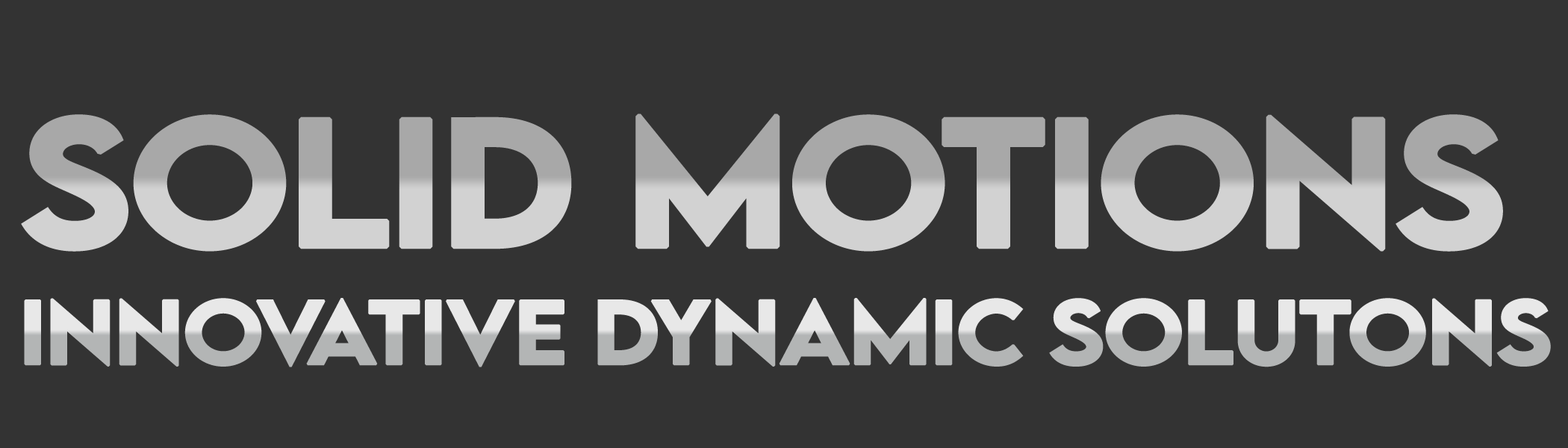
<style>
.page{position:relative;width:1568px;height:448px;background:#333333}
.page>*{position:absolute;margin:0}
.t1{font:161.3px "LEMONMILK-Medium";letter-spacing:-0.02em;font-weight:bold;scale:1.12 1}
.t2{font:80.6px "LEMONMILK-Medium";letter-spacing:-0.02em;font-weight:bold;scale:1.12 1}
</style>
<div class="page">
<p class="t1" style="left:21px;top:113px;width:1482px;height:139px">solid motions</p>
<p class="t2" style="left:24px;top:298px;width:1527px;height:69px">Innovative Dynamic Solutons</p>
</div>
